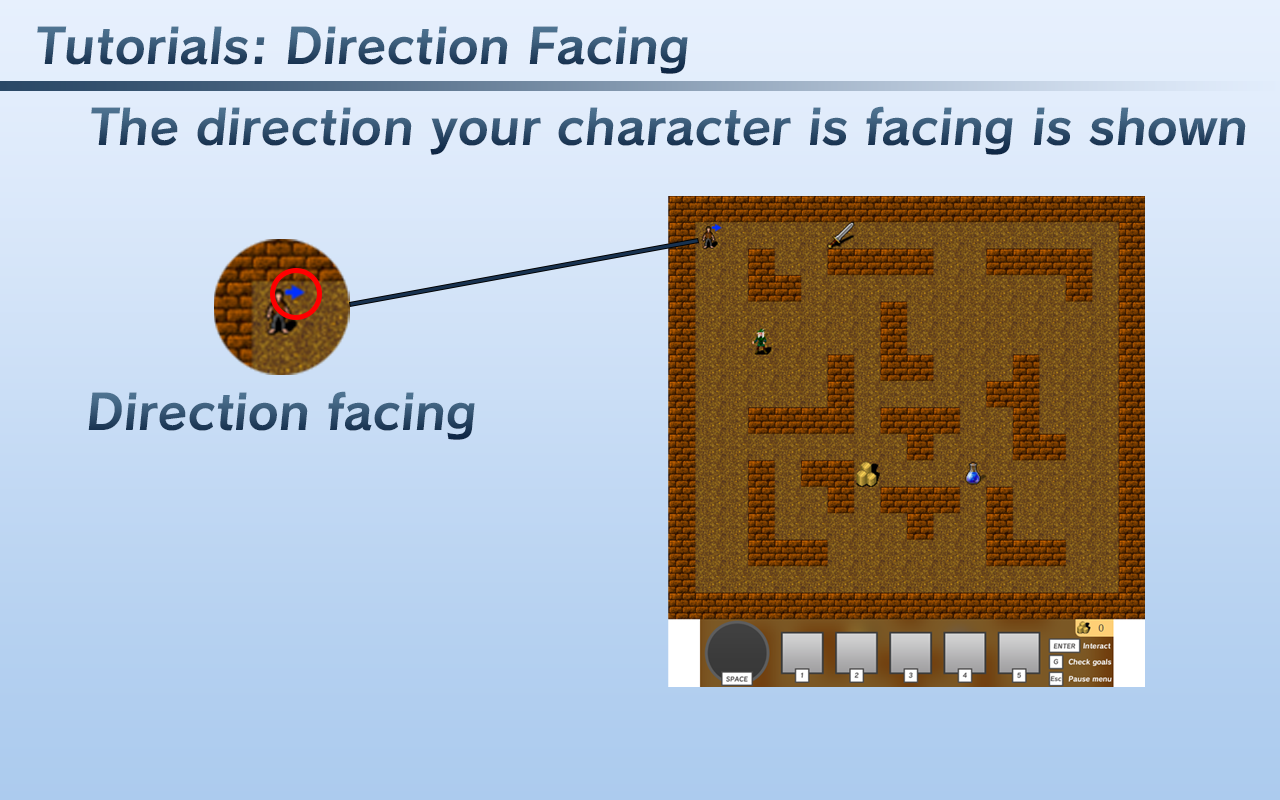
<style>
.page{position:relative;width:1280px;height:800px}
.page>*{position:absolute;margin:0}
.t1{font:48px "Calamity-Bold"}
.t2{font:48px "Calamity-Bold";color:#2f4e6c}
</style>
<div class="page">
<p class="t1" style="left:37px;top:26px;width:651px;height:48px">Tutorials: Direction Facing</p>
<p class="t2" style="left:91px;top:106px;width:1155px;height:49px">The direction your character is facing is shown</p>
<p class="t1" style="left:88px;top:391px;width:387px;height:49px">Direction facing</p>
</div>
